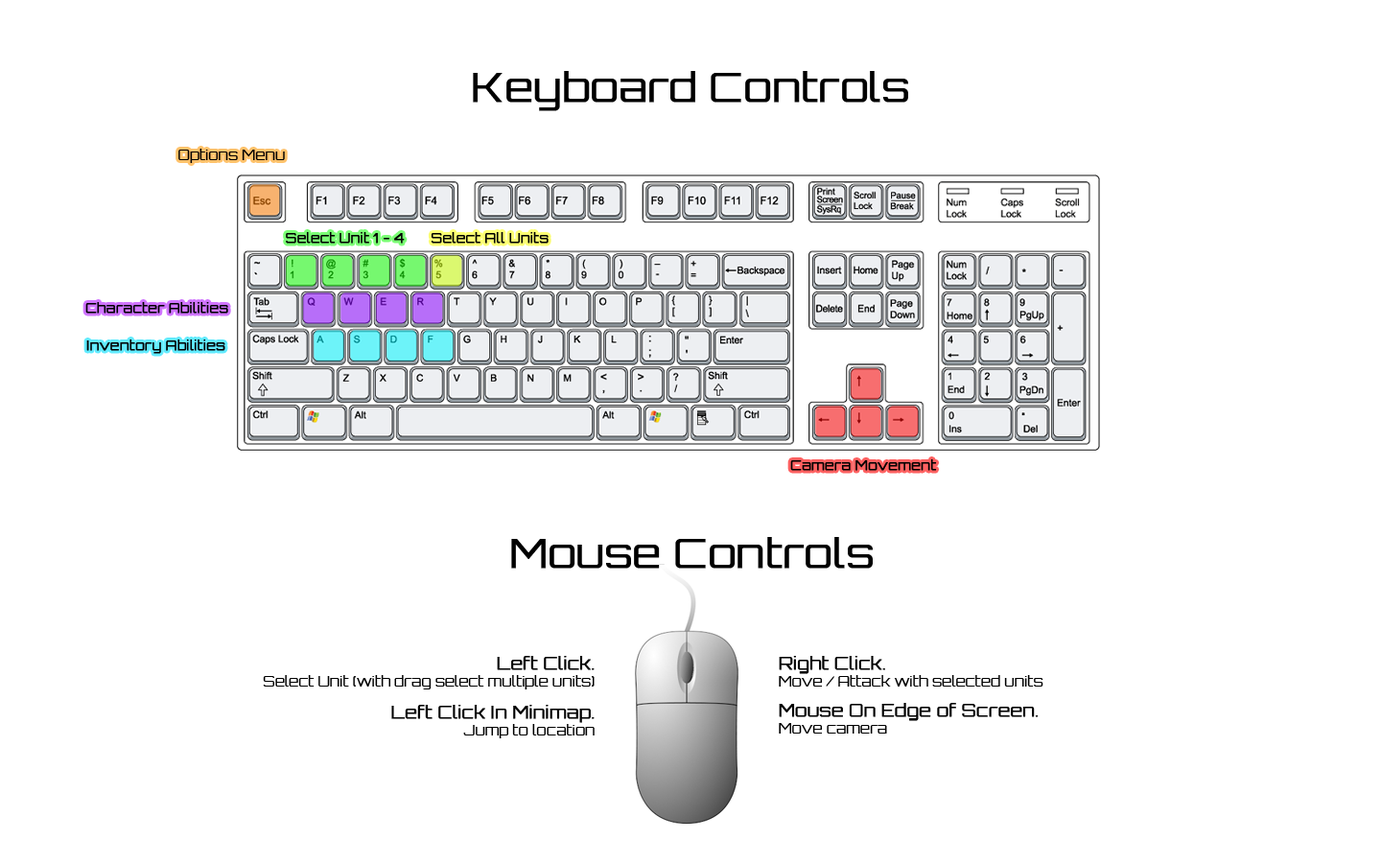
<style>
.page{position:relative;width:1381px;height:863px;background:#ffffff}
.page>*{position:absolute;margin:0}
.t1{font:40.3px "Orbitron-Light";color:#000000;font-weight:bold}
.t2{font:14.4px "Orbitron-Light";color:#000000}
.t3{font:13.4px "Orbitron-Light";color:#000000;font-weight:bold}
.t4{font:14.4px/17.3px "Orbitron-Light";color:#000000}
.t5{font:17.3px/17.3px "Orbitron-Light";color:#000000;font-weight:bold}
</style>
<div class="page">
<p class="t1" style="left:473px;top:71px;width:435px;height:40px">Keyboard Controls</p>
<p class="t2" style="left:178px;top:149px;width:107px;height:14px">Options Menu</p>
<p class="t3" style="left:286px;top:232px;width:119px;height:12px">Select Unit 1 - 4</p>
<p class="t3" style="left:431px;top:232px;width:118px;height:12px">Select All Units</p>
<p class="t3" style="left:85px;top:302px;width:143px;height:12px">Character Abilities</p>
<p class="t3" style="left:86px;top:340px;width:139px;height:14px">Inventory Abilities</p>
<p class="t3" style="left:790px;top:459px;width:147px;height:12px">Camera Movement</p>
<p class="t1" style="left:511px;top:537px;width:362px;height:32px">Mouse Controls</p>
<p class="t4" style="left:263px;top:656px;width:332px;height:34px;text-align:right"><span class="t5">Left Click.<br></span>Select Unit (with drag select multiple units)</p>
<p class="t4" style="left:779px;top:656px;width:265px;height:31px"><span class="t5">Right Click.<br></span>Move / Attack with selected units</p>
<p class="t5" style="left:391px;top:705px;width:204px;height:34px;text-align:right">Left Click In Minimap.<br><span class="t4">Jump to location</span></p>
<p class="t5" style="left:779px;top:703px;width:260px;height:31px">Mouse On Edge of Screen.<br><span class="t4">Move camera</span></p>
</div>
